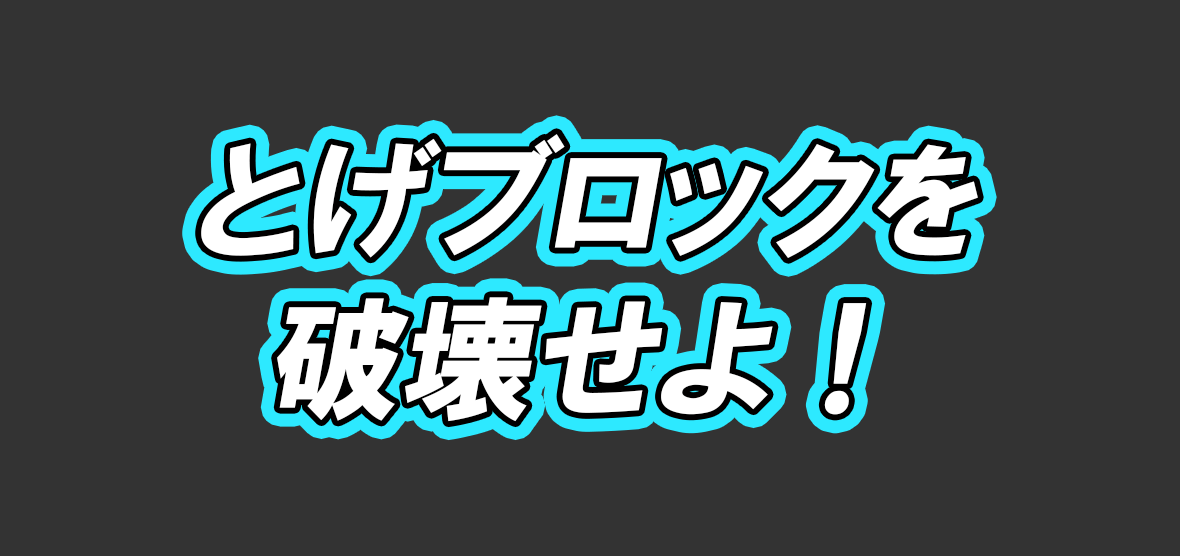
<style>
.page{position:relative;width:1180px;height:556px;background:#333333}
.page>*{position:absolute;margin:0}
.t1{font:133.3px/158.3px "HGPSoeiKakugothicUB";color:#ffffff;font-style:italic}
</style>
<div class="page">
<p class="t1" style="left:201px;top:134px;width:777px;height:288px;text-align:center">とげブロックを<br>破壊せよ！</p>
</div>
